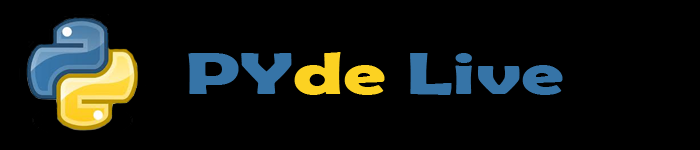
<style>
.page{position:relative;width:700px;height:150px;background:#000000}
.page>*{position:absolute;margin:0}
.t1{font:60px "BerlinSansFBDemi-Bold";color:#3674a7;scale:1.41 1}
.t2{font:60px "BerlinSansFBDemi-Bold";color:#fcd222;scale:1.41 1}
</style>
<div class="page">
<p class="t1" style="left:188px;top:52px;width:375px;height:43px">PY<span class="t2">de </span>Live</p>
</div>
